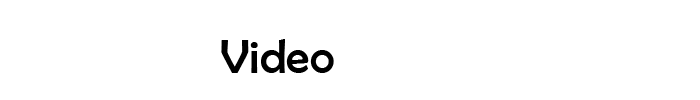
<style>
.page{position:relative;width:700px;height:100px;background:#ffffff}
.page>*{position:absolute;margin:0}
.t1{font:48px "BerlinSansFB-Reg";color:#000000}
</style>
<div class="page">
<p class="t1" style="left:221px;top:39px;width:113px;height:34px">Video</p>
</div>
